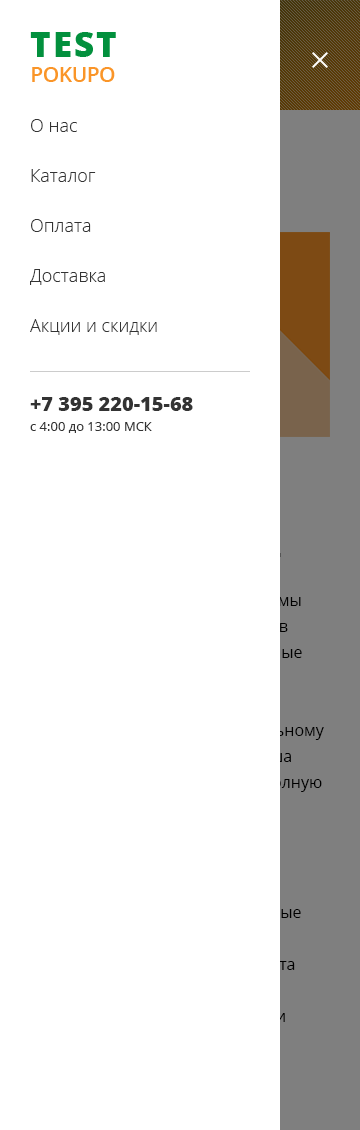
<style>
.page{position:relative;width:360px;height:1130px;background:#ffffff}
.page>*{position:absolute;margin:0}
.t1{font:18px "OpenSans-Light";color:#333333}
.t2{font:13px/20px "OpenSans";color:#333333}
.t3{font:20px/30px "OpenSans-Extrabold";color:#333333}
</style>
<div class="page">
<p class="t1" style="left:31px;top:119px;width:46px;height:13px">О нас</p>
<p class="t1" style="left:31px;top:169px;width:65px;height:13px">Каталог</p>
<p class="t1" style="left:31px;top:219px;width:60px;height:13px">Оплата</p>
<p class="t1" style="left:30px;top:269px;width:75px;height:16px">Доставка</p>
<p class="t1" style="left:30px;top:319px;width:127px;height:16px">Акции и скидки</p>
<p class="t2" style="left:30px;top:397px;width:163px;height:36px"><span class="t3">+7 395 220-15-68<br></span>с 4:00 до 13:00 МСК</p>
</div>
